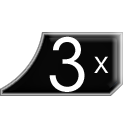
<style>
.page{position:relative;width:128px;height:128px;background:#ffffff}
.page>*{position:absolute;margin:0}
.t1{font:72px "ITCAvantGardeStd-Bk";color:#ffffff}
.t2{font:30px "ITCAvantGardeStd-Bk";color:#ffffff}
</style>
<div class="page">
<p class="t1" style="left:49px;top:36px;width:36px;height:56px">3</p>
<p class="t2" style="left:94px;top:56px;width:15px;height:17px">x</p>
</div>
